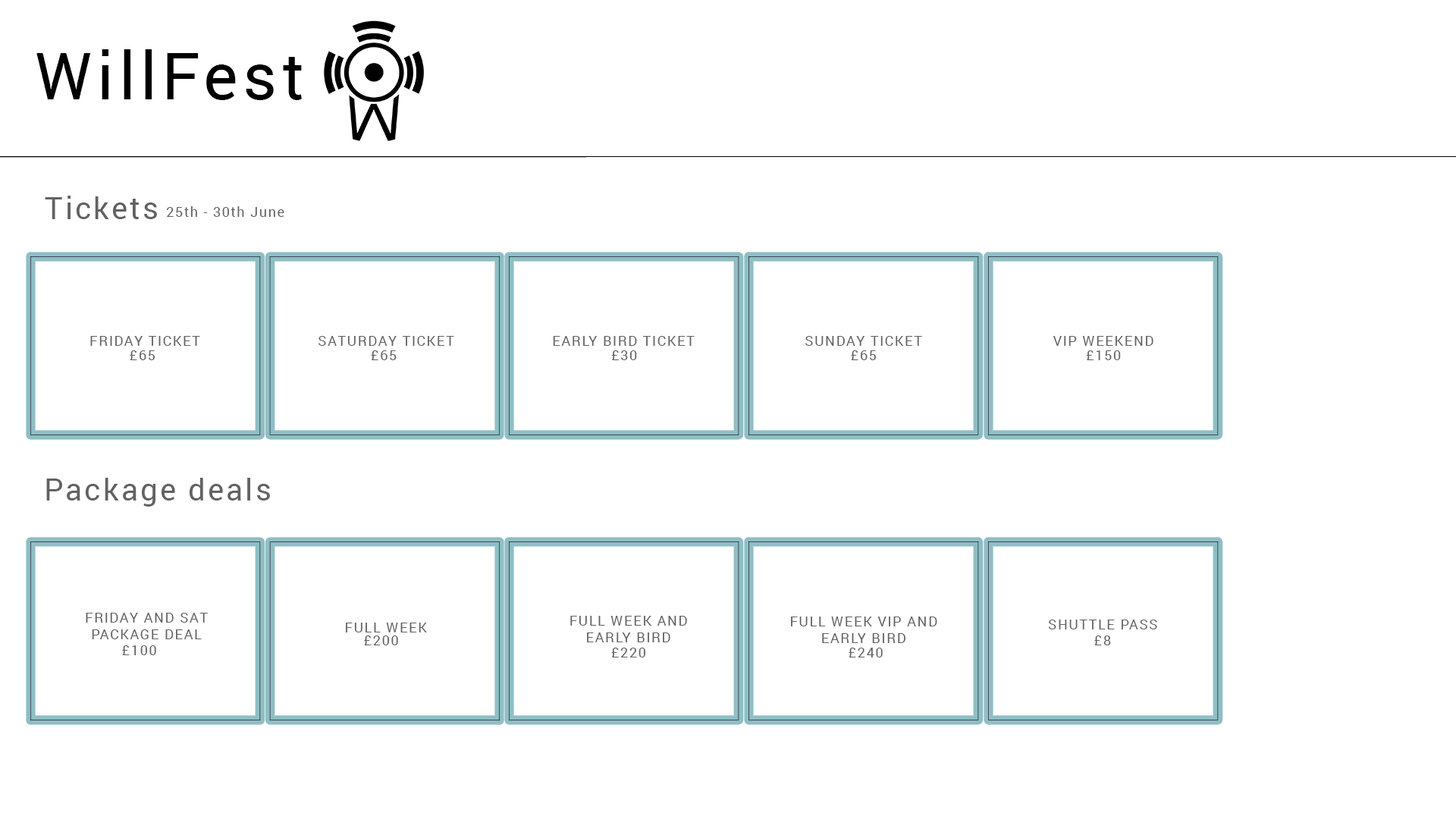
<style>
.page{position:relative;width:1456px;height:819px;background:#ffffff}
.page>*{position:absolute;margin:0}
.t1{font:65.2px "Roboto-Regular";letter-spacing:0.075em;color:#000000}
.t2{font:30.6px "Roboto-Regular";letter-spacing:0.075em;color:#626262}
.t3{font:14px "Roboto-Regular";letter-spacing:0.075em;color:#626262}
</style>
<div class="page">
<p class="t1" style="left:36px;top:49px;width:266px;height:51px">WillFest</p>
<p class="t2" style="left:45px;top:196px;width:112px;height:23px">Tickets</p>
<p class="t3" style="left:167px;top:206px;width:117px;height:11px">25th - 30th June</p>
<p class="t3" style="left:90px;top:336px;width:110px;height:10px">FRIDAY TICKET</p>
<p class="t3" style="left:318px;top:336px;width:136px;height:10px">SATURDAY TICKET</p>
<p class="t3" style="left:553px;top:336px;width:142px;height:10px">EARLY BIRD TICKET</p>
<p class="t3" style="left:805px;top:336px;width:117px;height:10px">SUNDAY TICKET</p>
<p class="t3" style="left:1053px;top:336px;width:100px;height:10px">VIP WEEKEND</p>
<p class="t3" style="left:130px;top:350px;width:25px;height:10px">£65</p>
<p class="t3" style="left:371px;top:350px;width:26px;height:10px">£65</p>
<p class="t3" style="left:611px;top:350px;width:26px;height:10px">£30</p>
<p class="t3" style="left:851px;top:350px;width:25px;height:10px">£65</p>
<p class="t3" style="left:1086px;top:350px;width:35px;height:10px">£150</p>
<p class="t2" style="left:46px;top:478px;width:224px;height:29px">Package deals</p>
<p class="t3" style="left:86px;top:613px;width:122px;height:26px;text-align:center">FRIDAY AND SAT<br>PACKAGE DEAL</p>
<p class="t3" style="left:570px;top:616px;width:117px;height:26px;text-align:center">FULL WEEK AND<br>EARLY BIRD</p>
<p class="t3" style="left:791px;top:617px;width:146px;height:26px;text-align:center">FULL WEEK VIP AND<br>EARLY BIRD</p>
<p class="t3" style="left:346px;top:623px;width:81px;height:9px">FULL WEEK</p>
<p class="t3" style="left:1048px;top:620px;width:109px;height:9px">SHUTTLE PASS</p>
<p class="t3" style="left:364px;top:635px;width:34px;height:10px">£200</p>
<p class="t3" style="left:1094px;top:635px;width:17px;height:10px">£8</p>
<p class="t3" style="left:122px;top:645px;width:34px;height:10px">£100</p>
<p class="t3" style="left:611px;top:648px;width:34px;height:9px">£220</p>
<p class="t3" style="left:849px;top:648px;width:34px;height:9px">£240</p>
</div>
